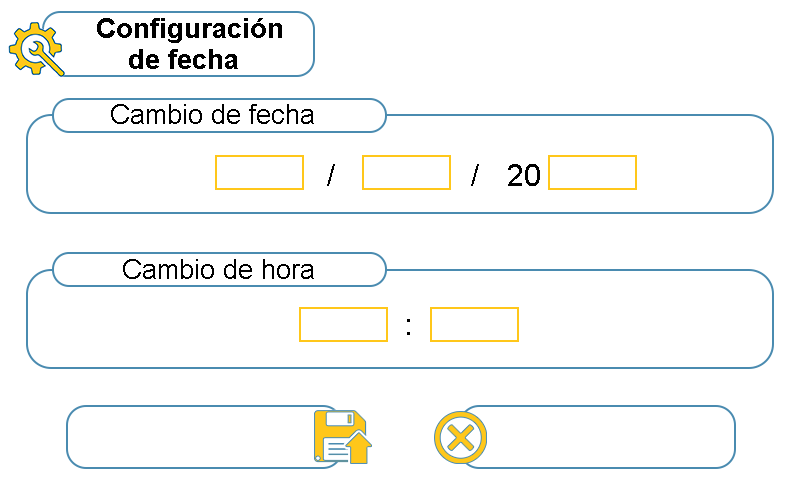
<style>
.page{position:relative;width:800px;height:480px;background:#ffffff}
.page>*{position:absolute;margin:0}
.t1{font:26.7px "Arial-BoldMT";color:#000000}
.t2{font:26.7px "ArialMT";color:#000000}
.t3{font:31.1px "ArialMT";color:#000000}
</style>
<div class="page">
<p class="t1" style="left:97px;top:18px;width:185px;height:51px">Configuración <br>    de fecha</p>
<p class="t2" style="left:111px;top:104px;width:203px;height:20px">Cambio de fecha</p>
<p class="t3" style="left:327px;top:164px;width:213px;height:22px">/               /   20</p>
<p class="t2" style="left:123px;top:259px;width:191px;height:20px">Cambio de hora</p>
<p class="t3" style="left:407px;top:319px;width:3px;height:16px">:</p>
</div>
